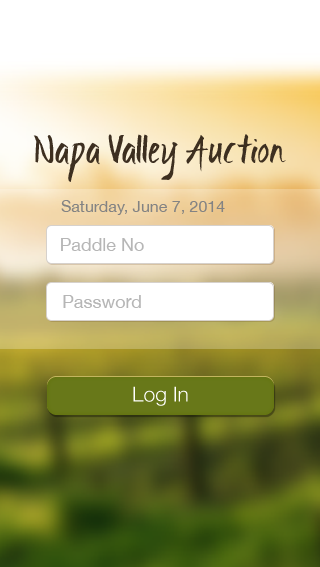
<style>
.page{position:relative;width:320px;height:567px}
.page>*{position:absolute;margin:0}
.t1{font:34px "IgnitetheLight";color:#3d2f20}
.t2{font:16px "HelveticaNeue";color:#838383}
.t3{font:18px "HelveticaNeue";color:#b6b6b6}
</style>
<div class="page">
<p class="t1" style="left:33px;top:134px;width:253px;height:48px">Napa Valley Auction</p>
<p class="t2" style="left:61px;top:200px;width:164px;height:15px">Saturday, June 7, 2014</p>
<p class="t3" style="left:61px;top:238px;width:83px;height:13px">Paddle No</p>
<p class="t3" style="left:63px;top:295px;width:78px;height:13px">Password</p>
</div>
